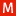
<style>
.page{position:relative;width:16px;height:16px;background:#e61f07}
.page>*{position:absolute;margin:0}
.t1{font:15px "FiraSansOT";color:#ffffff;text-transform:uppercase}
</style>
<div class="page">
<p class="t1" style="left:3px;top:2px;width:10px;height:11px">M</p>
</div>
